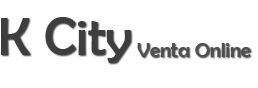
<style>
.page{position:relative;width:258px;height:88px;background:#ffffff}
.page>*{position:absolute;margin:0}
.t1{font:54.2px "BerlinSansFB-Reg";color:#3e3e3e}
.t2{font:20.8px "BerlinSansFB-Reg";color:#4f4f4f}
</style>
<div class="page">
<p class="t1" style="left:1px;top:17px;width:130px;height:46px">K City</p>
<p class="t2" style="left:137px;top:43px;width:114px;height:14px">Venta Online</p>
</div>
